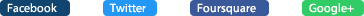
<style>
.page{position:relative;width:364px;height:16px;background:#ffffff}
.page>*{position:absolute;margin:0}
.t1{font:12px "MyriadPro-Regular";color:#ffffff}
</style>
<div class="page">
<p class="t1" style="left:109px;top:3px;width:37px;height:10px">Twitter</p>
<p class="t1" style="left:197px;top:3px;width:59px;height:12px">Foursquare</p>
<p class="t1" style="left:309px;top:3px;width:45px;height:12px">Google+</p>
</div>
